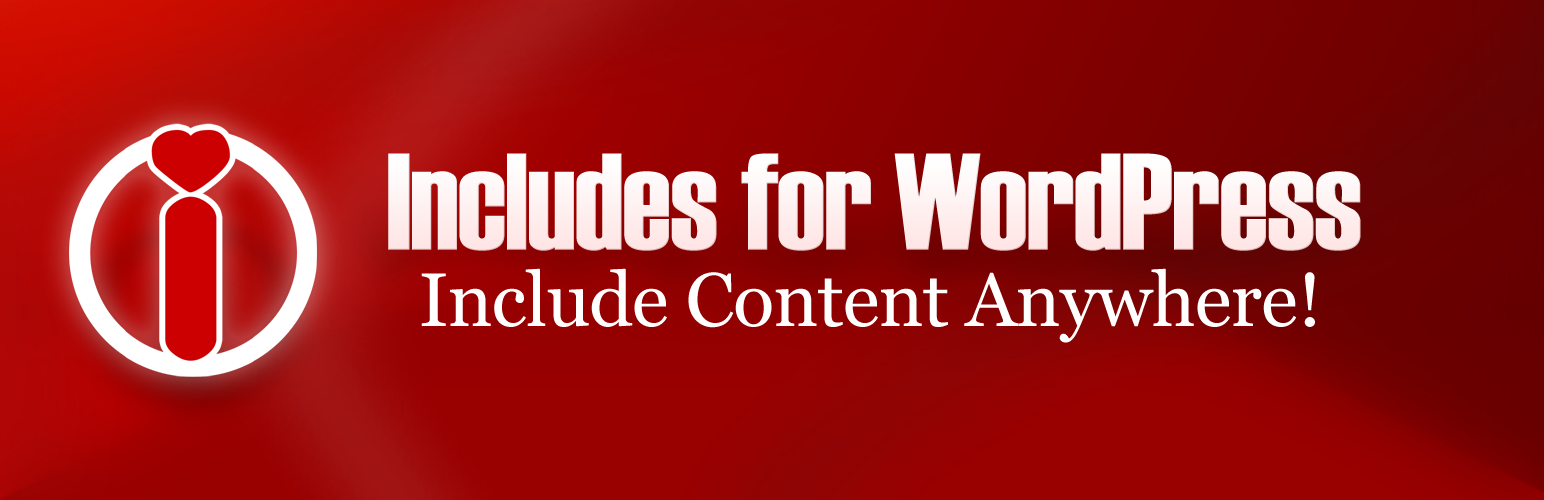
<style>
.page{position:relative;width:1544px;height:500px}
.page>*{position:absolute;margin:0}
.t1{font:137.2px "Haettenschweiler";letter-spacing:-0.01em;color:#ffffff}
.t2{font:75.8px "Georgia";letter-spacing:-0.01em;color:#ffffff}
</style>
<div class="page">
<p class="t1" style="left:388px;top:153px;width:973px;height:98px">Includes for WordPress</p>
<p class="t2" style="left:421px;top:268px;width:894px;height:75px">Include Content Anywhere!</p>
</div>
